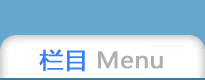
<style>
.page{position:relative;width:205px;height:80px;background:#67a7cd}
.page>*{position:absolute;margin:0}
.t1{font:22.3px "MicrosoftYaHei";color:#adb0b2;font-weight:bold;scale:1.07 1}
.t2{font:22.3px "MicrosoftYaHei";color:#3680fa;font-weight:bold;scale:1.07 1}
</style>
<div class="page">
<p class="t1" style="left:39px;top:49px;width:124px;height:23px"><span class="t2">栏目 </span>Menu</p>
</div>
